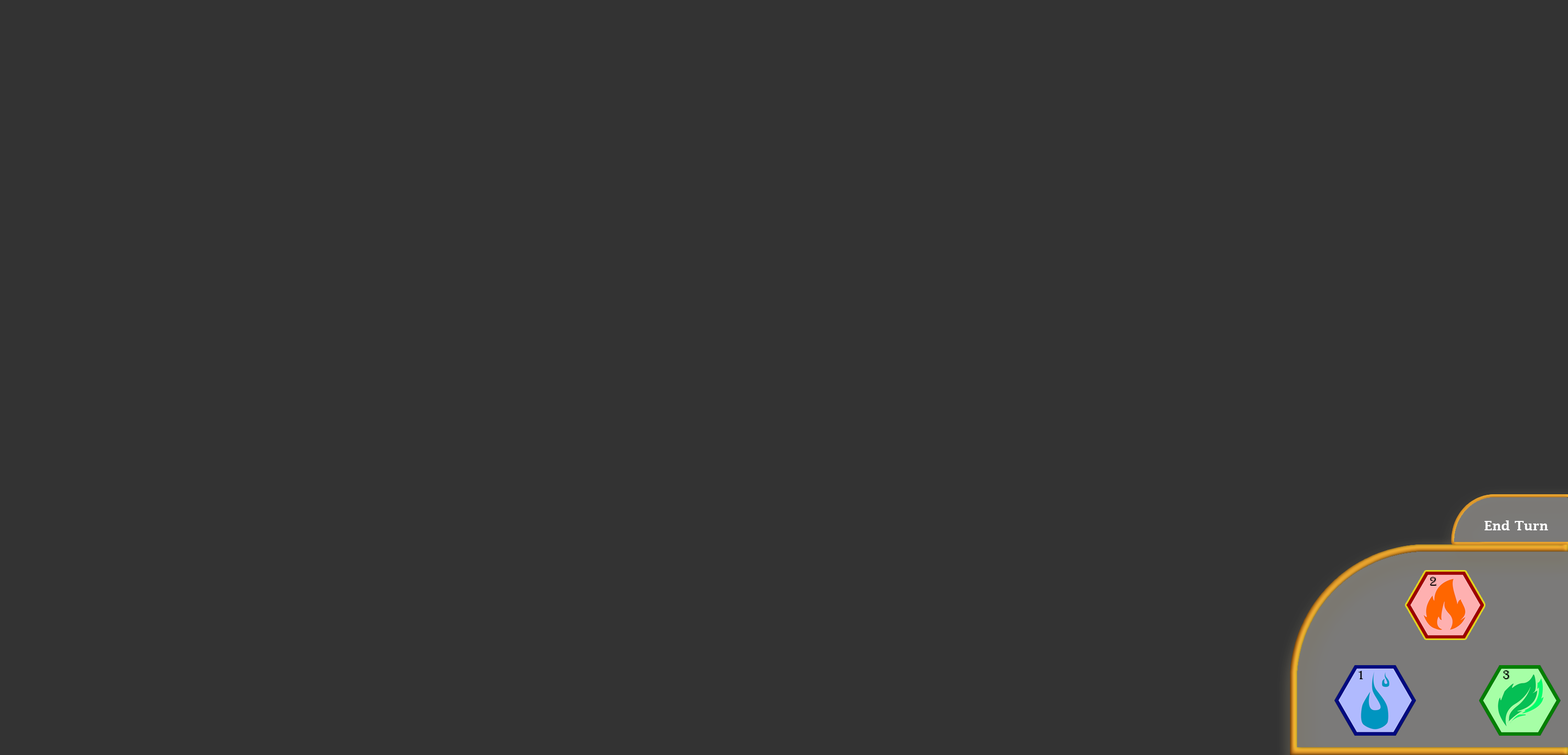
<style>
.page{position:relative;width:1568px;height:755px;background:#333333}
.page>*{position:absolute;margin:0}
.t1{font:13px "LucidaFax-Demi";color:#ffffff}
.t2{font:13px "Algerian";color:#000000}
</style>
<div class="page">
<p class="t1" style="left:1484px;top:521px;width:64px;height:10px">End Turn</p>
<p class="t2" style="left:1429px;top:577px;width:8px;height:9px">2</p>
<p class="t2" style="left:1358px;top:671px;width:5px;height:8px">1</p>
<p class="t2" style="left:1503px;top:671px;width:7px;height:8px">3</p>
</div>
